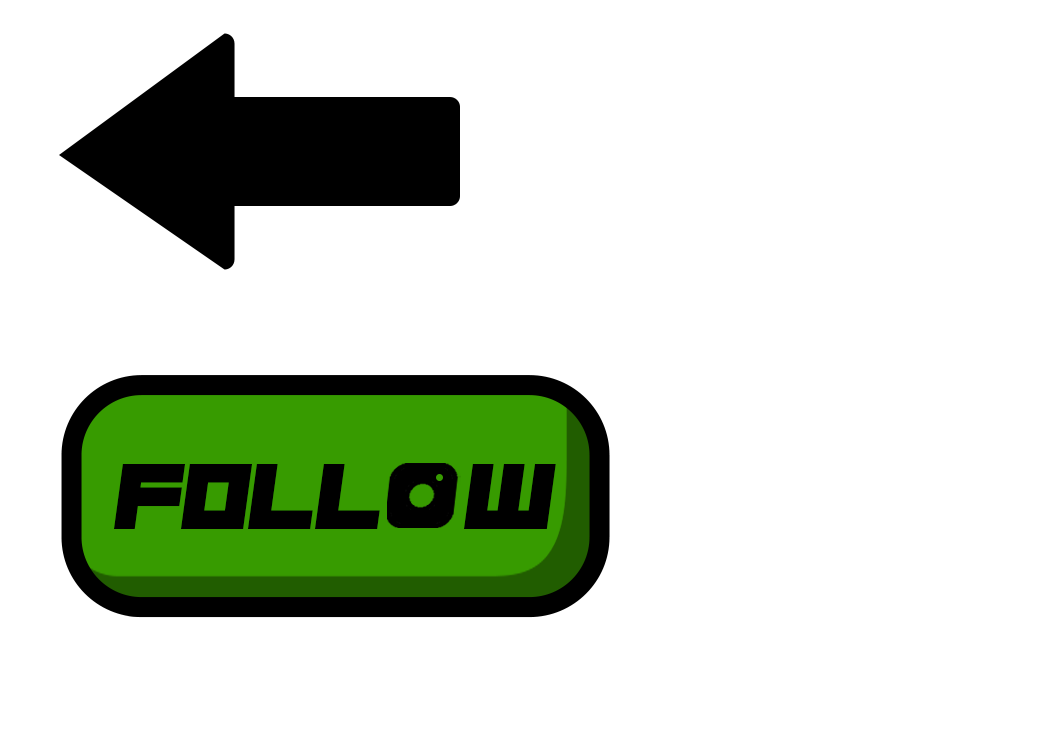
<style>
.page{position:relative;width:1050px;height:750px;background:#ffffff}
.page>*{position:absolute;margin:0}
.t1{font:95.2px "NauSea";color:#000000;scale:1.11 1}
</style>
<div class="page">
<p class="t1" style="left:114px;top:464px;width:442px;height:65px">foll    w</p>
</div>
